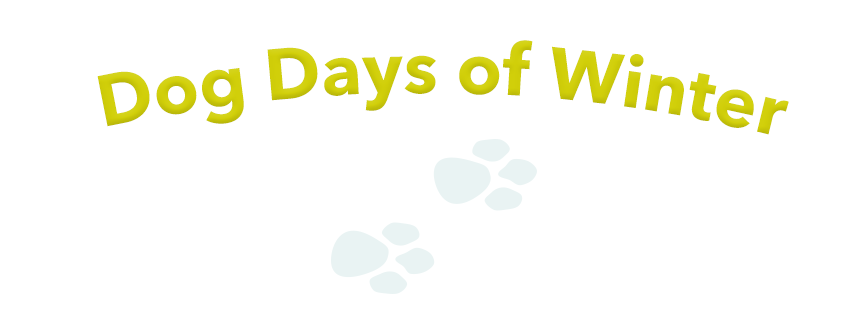
<style>
.page{position:relative;width:862px;height:319px;background:#ffffff}
.page>*{position:absolute;margin:0}
.t1{font:72px "AvenirNext-Bold";color:#d0ce0d}
.t2{font:72px "AvenirNext-Bold";color:#e9f3f3}
</style>
<div class="page">
<p class="t1" style="left:97px;top:40px;width:692px;height:95px"><span class="t2">  </span>   Dog Days of Winter</p>
</div>
